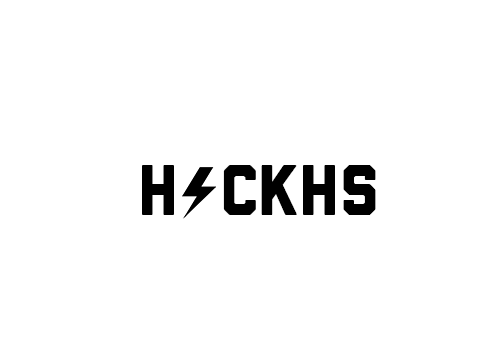
<style>
.page{position:relative;width:504px;height:360px;background:#ffffff}
.page>*{position:absolute;margin:0}
.t1{font:72px "Liberator";letter-spacing:-0.025em;color:#000000}
.t2{font:72px "Liberator";color:#000000}
</style>
<div class="page">
<p class="t1" style="left:142px;top:165px;width:234px;height:50px">H  C<span class="t2">KHS</span></p>
</div>
